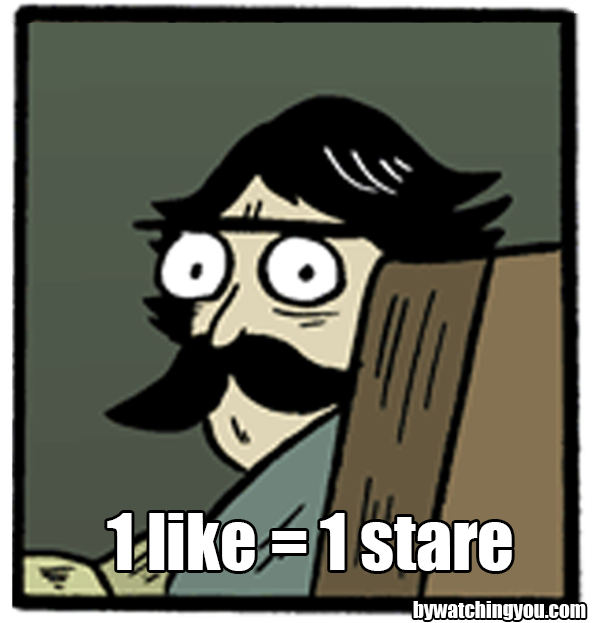
<style>
.page{position:relative;width:595px;height:623px}
.page>*{position:absolute;margin:0}
.t1{font:71.8px "Impact";color:#ffffff}
.t2{font:21.2px "Impact";color:#ffffff}
</style>
<div class="page">
<p class="t1" style="left:107px;top:513px;width:405px;height:58px">1 like = 1 stare</p>
<p class="t2" style="left:413px;top:601px;width:173px;height:19px">bywatchingyou.com</p>
</div>
